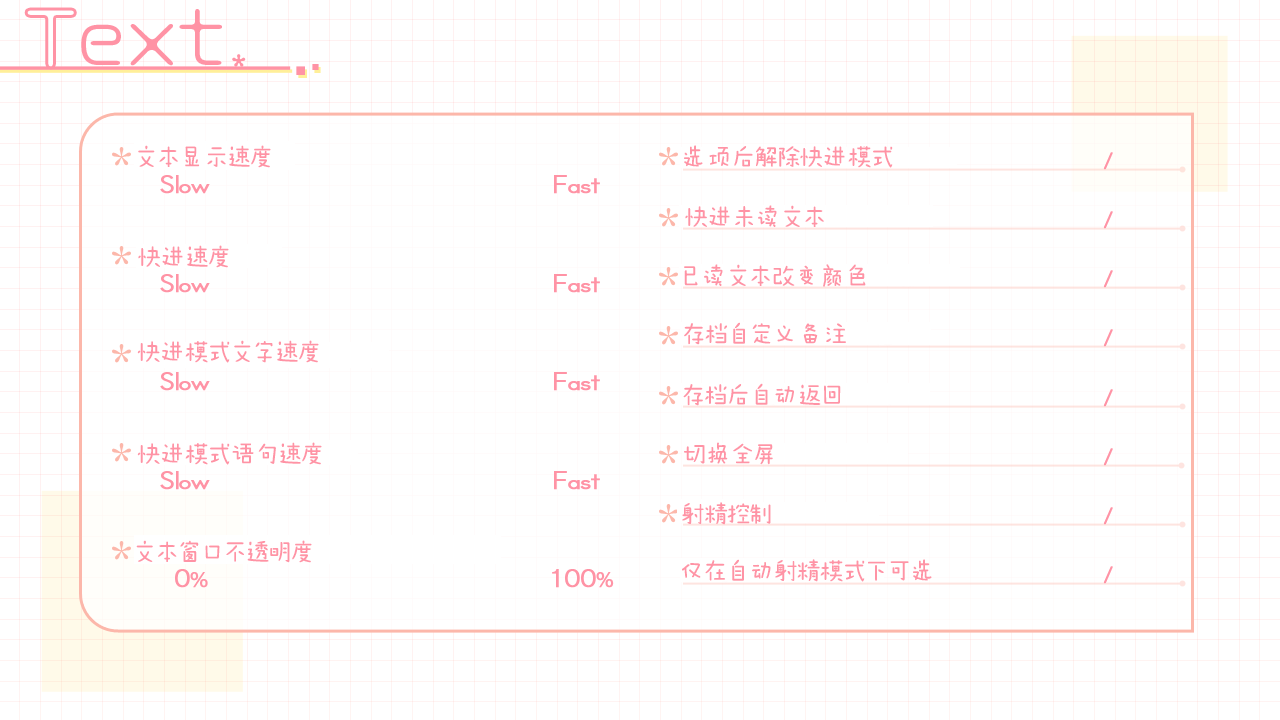
<style>
.page{position:relative;width:1280px;height:720px;background:#ffffff}
.page>*{position:absolute;margin:0}
.t1{font:26px "¢è?";color:#ff93a5}
</style>
<div class="page">
<p class="t1" style="left:138px;top:145px;width:133px;height:23px">文本显示速度</p>
<p class="t1" style="left:684px;top:145px;width:209px;height:23px">选项后解除快进模式</p>
<p class="t1" style="left:685px;top:205px;width:139px;height:22px">快进未读文本</p>
<p class="t1" style="left:138px;top:245px;width:91px;height:23px">快进速度</p>
<p class="t1" style="left:684px;top:264px;width:182px;height:23px">已读文本改变颜色</p>
<p class="t1" style="left:684px;top:322px;width:162px;height:23px">存档自定义备注</p>
<p class="t1" style="left:137px;top:340px;width:182px;height:23px">快进模式文字速度</p>
<p class="t1" style="left:683px;top:383px;width:158px;height:23px">存档后自动返回</p>
<p class="t1" style="left:137px;top:442px;width:185px;height:23px">快进模式语句速度</p>
<p class="t1" style="left:684px;top:442px;width:89px;height:23px">切换全屏</p>
<p class="t1" style="left:682px;top:502px;width:89px;height:23px">射精控制</p>
<p class="t1" style="left:136px;top:540px;width:176px;height:23px">文本窗口不透明度</p>
<p class="t1" style="left:682px;top:559px;width:250px;height:23px">仅在自动射精模式下可选</p>
</div>
